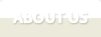
<style>
.page{position:relative;width:101px;height:37px;background:#ffffff}
.page>*{position:absolute;margin:0}
.t1{font:16px "MyriadPro-Semibold";color:#ffffff;text-transform:uppercase;font-weight:bold}
</style>
<div class="page">
<p class="t1" style="left:13px;top:12px;width:75px;height:12px">about us</p>
</div>
